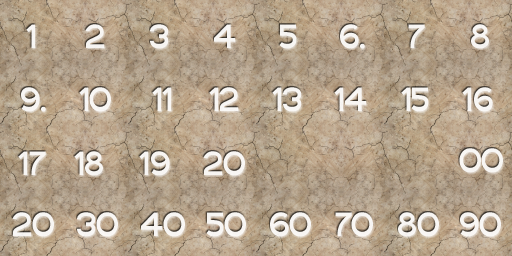
<style>
.page{position:relative;width:512px;height:256px}
.page>*{position:absolute;margin:0}
.t1{font:48px "Gautami";letter-spacing:-0.05em;color:#f7f5f3}
.t2{font:48px "Gautami";letter-spacing:-0.05em;color:#f7f5f2}
.t3{font:48px "Gautami";letter-spacing:-0.05em;color:#f8f5f2}
.t4{font:48px "Gautami";letter-spacing:-0.05em;color:#f8f6f3}
.t5{font:48px "Gautami";letter-spacing:-0.05em;color:#f8f6f4}
.t6{font:48px "Gautami";letter-spacing:-0.05em;color:#f8f5f3}
</style>
<div class="page">
<p class="t1" style="left:26px;top:24px;width:10px;height:24px">1</p>
<p class="t2" style="left:85px;top:24px;width:20px;height:24px">2</p>
<p class="t2" style="left:150px;top:24px;width:19px;height:25px">3</p>
<p class="t3" style="left:214px;top:24px;width:22px;height:24px">4</p>
<p class="t2" style="left:279px;top:24px;width:18px;height:25px">5</p>
<p class="t1" style="left:340px;top:24px;width:25px;height:25px">6.</p>
<p class="t2" style="left:408px;top:24px;width:17px;height:24px">7</p>
<p class="t3" style="left:471px;top:24px;width:18px;height:25px">8</p>
<p class="t4" style="left:21px;top:87px;width:25px;height:25px">9.</p>
<p class="t5" style="left:79px;top:87px;width:32px;height:25px">10</p>
<p class="t4" style="left:152px;top:87px;width:20px;height:24px">11</p>
<p class="t5" style="left:209px;top:87px;width:30px;height:24px">12</p>
<p class="t5" style="left:272px;top:87px;width:30px;height:25px">13</p>
<p class="t4" style="left:334px;top:87px;width:33px;height:24px">14</p>
<p class="t4" style="left:401px;top:87px;width:28px;height:25px">15</p>
<p class="t5" style="left:462px;top:87px;width:31px;height:25px">16</p>
<p class="t4" style="left:459px;top:148px;width:44px;height:25px">00</p>
<p class="t1" style="left:18px;top:151px;width:28px;height:24px">17</p>
<p class="t6" style="left:74px;top:151px;width:29px;height:25px">18</p>
<p class="t2" style="left:139px;top:151px;width:31px;height:25px">19</p>
<p class="t4" style="left:203px;top:151px;width:42px;height:25px">20</p>
<p class="t4" style="left:12px;top:212px;width:42px;height:25px">20</p>
<p class="t4" style="left:77px;top:212px;width:41px;height:25px">30</p>
<p class="t4" style="left:141px;top:212px;width:44px;height:25px">40</p>
<p class="t4" style="left:206px;top:212px;width:40px;height:25px">50</p>
<p class="t4" style="left:270px;top:212px;width:41px;height:25px">60</p>
<p class="t4" style="left:335px;top:212px;width:38px;height:25px">70</p>
<p class="t4" style="left:398px;top:212px;width:41px;height:25px">80</p>
<p class="t4" style="left:460px;top:212px;width:41px;height:25px">90</p>
</div>
